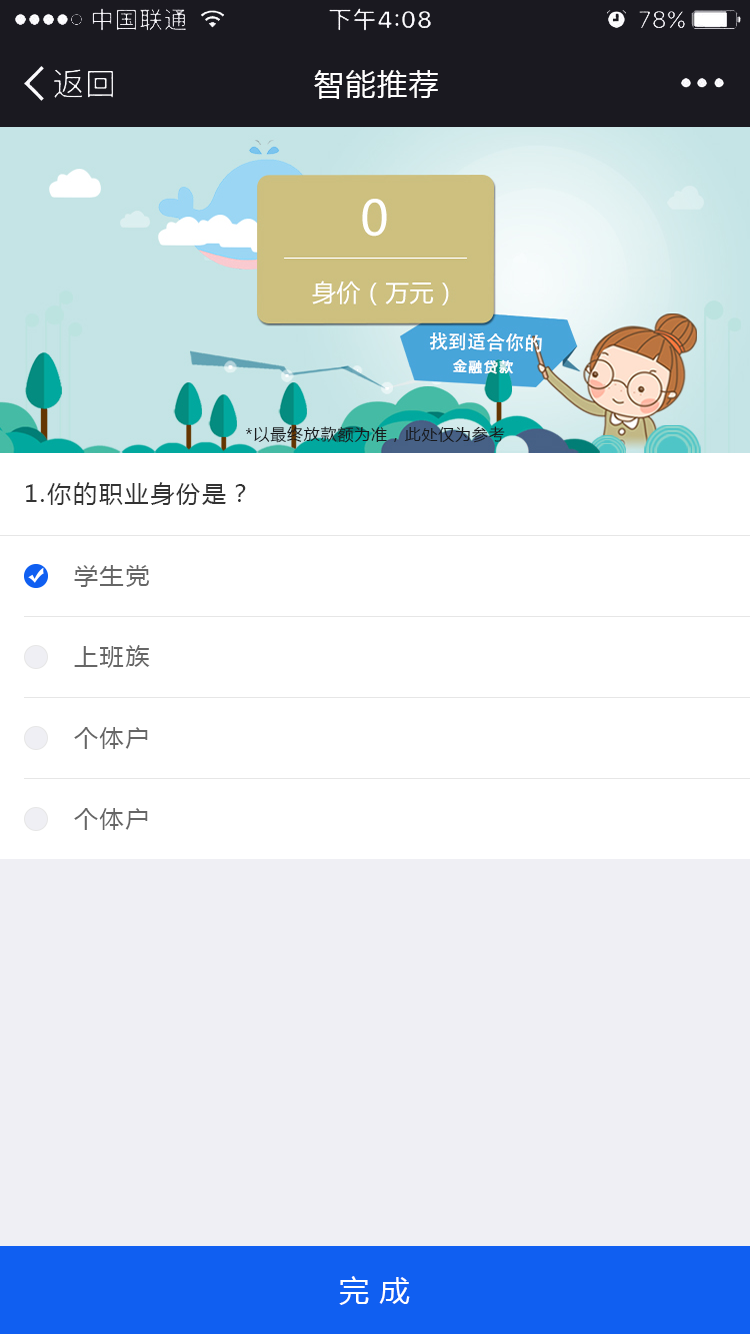
<style>
.page{position:relative;width:750px;height:1334px;background:#efeff4}
.page>*{position:absolute;margin:0}
.t1{font:30px "MicrosoftYaHei";letter-spacing:0.05em;color:#fffefe}
.t2{font:16px "MicrosoftYaHei";letter-spacing:0.05em;color:#1a1b1d}
.t3{font:24px "MicrosoftYaHei";letter-spacing:0.075em;color:#333333}
.t4{font:24px "MicrosoftYaHei";letter-spacing:0.075em;color:#666666}
.t5{font:30px "MicrosoftYaHei";letter-spacing:0.355em;color:#ffffff}
</style>
<div class="page">
<p class="t1" style="left:314px;top:70px;width:124px;height:29px">智能推荐</p>
<p class="t2" style="left:246px;top:426px;width:259px;height:17px">*以最终放款额为准，此处仅为参考</p>
<p class="t3" style="left:26px;top:482px;width:220px;height:23px">1.你的职业身份是？</p>
<p class="t4" style="left:74px;top:565px;width:76px;height:22px">学生党</p>
<p class="t4" style="left:74px;top:645px;width:76px;height:23px">上班族</p>
<p class="t4" style="left:74px;top:727px;width:74px;height:22px">个体户</p>
<p class="t4" style="left:74px;top:808px;width:74px;height:22px">个体户</p>
<p class="t5" style="left:339px;top:1276px;width:71px;height:29px">完成</p>
</div>
